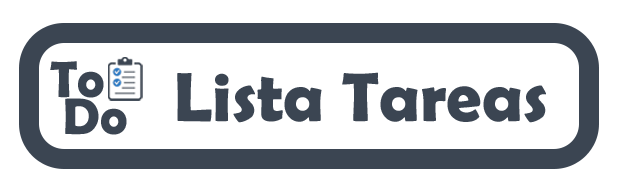
<style>
.page{position:relative;width:626px;height:189px;background:#ffffff}
.page>*{position:absolute;margin:0}
.t1{font:51.8px/36.6px "BerlinSansFBDemi-Bold";color:#3b4552}
.t2{font:70px "BerlinSansFBDemi-Bold";color:#3b4552}
</style>
<div class="page">
<p class="t1" style="left:50px;top:61px;width:77px;height:74px">To<br> Do</p>
<p class="t2" style="left:177px;top:72px;width:369px;height:51px">Lista Tareas</p>
</div>
